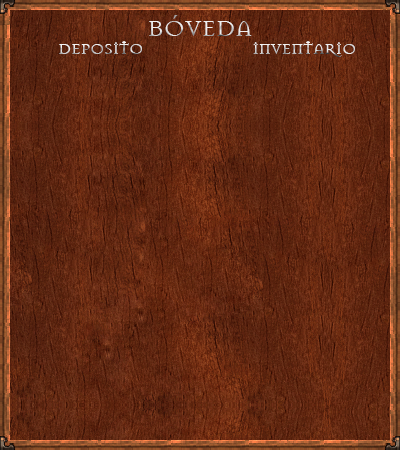
<style>
.page{position:relative;width:400px;height:450px}
.page>*{position:absolute;margin:0}
.t1{font:24px "Mason-Regular"}
.t2{font:16px "Mason-Regular"}
</style>
<div class="page">
<p class="t1" style="left:149px;top:15px;width:103px;height:21px">BÓVEDA</p>
<p class="t2" style="left:59px;top:41px;width:83px;height:13px">DEPOSITO</p>
<p class="t2" style="left:253px;top:41px;width:102px;height:16px">INVENTARIO</p>
</div>
